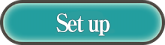
<style>
.page{position:relative;width:165px;height:45px}
.page>*{position:absolute;margin:0}
.t1{font:24px "RyuminPro-ExBold";letter-spacing:-0.08em;color:#ffffff;scale:0.9 1}
</style>
<div class="page">
<p class="t1" style="left:56px;top:13px;width:54px;height:23px">Set up</p>
</div>
